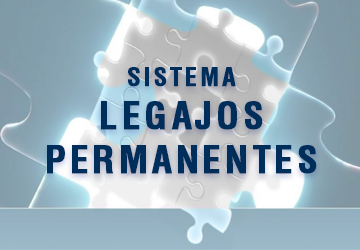
<style>
.page{position:relative;width:360px;height:250px}
.page>*{position:absolute;margin:0}
.t1{font:36px "Helvetica-Condensed-Bold";letter-spacing:0.1em;color:#002e5b;font-weight:bold}
.t2{font:24px "Helvetica-Condensed-Bold";letter-spacing:0.1em;color:#002e5b;font-weight:bold}
</style>
<div class="page">
<p class="t1" style="left:47px;top:67px;width:270px;height:107px;text-align:center"><span class="t2">SISTEMA<br></span>LEGAJOS<br>PERMANENTES</p>
</div>
